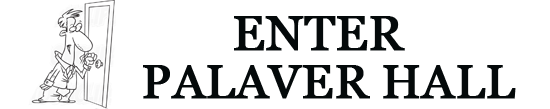
<style>
.page{position:relative;width:550px;height:109px;background:#ffffff}
.page>*{position:absolute;margin:0}
.t1{font:48.7px "Georgia";color:#04090a;text-transform:uppercase;font-weight:bold}
.t2{font:47.7px "Georgia";color:#04090a;text-transform:uppercase;font-weight:bold}
</style>
<div class="page">
<p class="t1" style="left:234px;top:16px;width:171px;height:35px">enter</p>
<p class="t2" style="left:143px;top:65px;width:373px;height:34px">Palaver hall</p>
</div>
